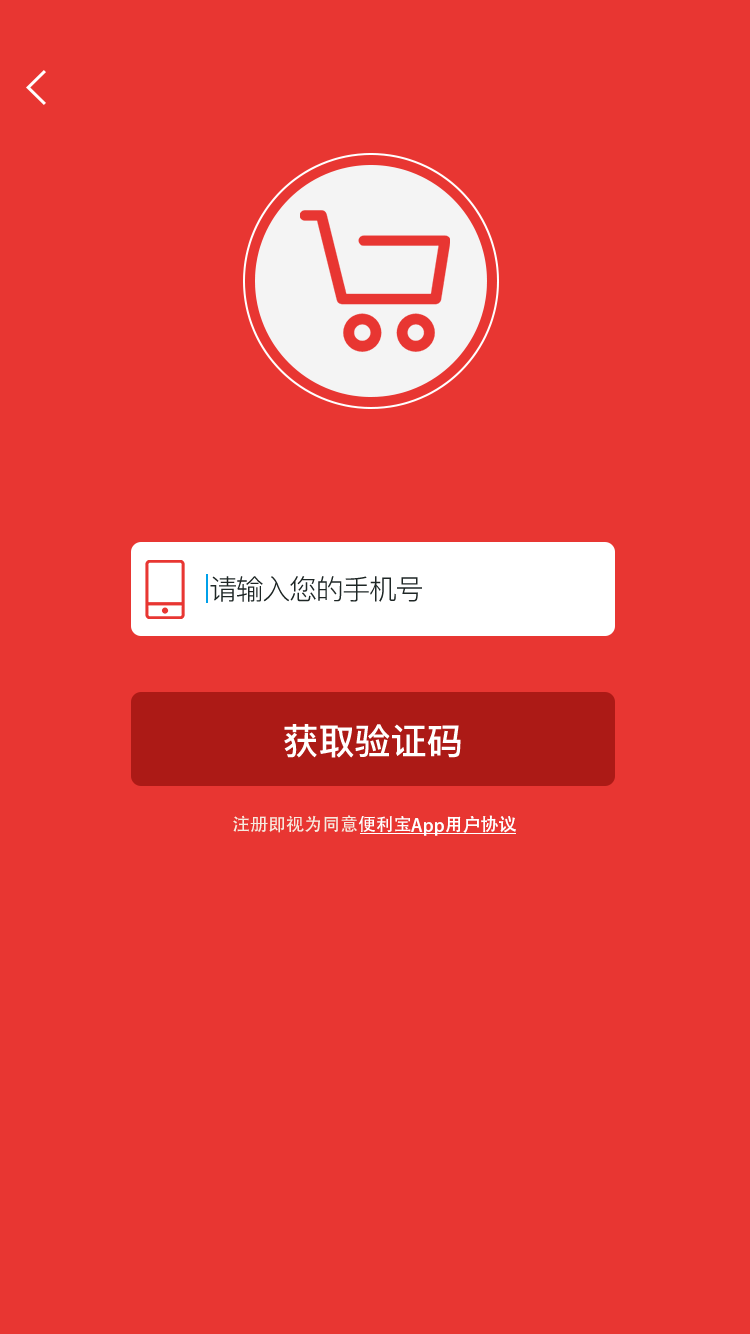
<style>
.page{position:relative;width:750px;height:1334px;background:#e83632}
.page>*{position:absolute;margin:0}
.t1{font:28px "PingFang-SC-Regular";letter-spacing:-0.05em;color:#1e2625}
.t2{font:36px "PingFang-SC-Bold";color:#ffffff}
.t3{font:17.7px "AdobeHeitiStd-Regular";color:#f7eadf}
.t4{font:17.7px "AdobeHeitiStd-Regular";color:#ffffff}
.t5{font:18px "AdobeHeitiStd-Regular";color:#ffffff}
</style>
<div class="page">
<p class="t1" style="left:210px;top:576px;width:212px;height:26px">请输入您的手机号</p>
<p class="t2" style="left:284px;top:724px;width:177px;height:34px">获取验证码</p>
<p class="t3" style="left:233px;top:815px;width:178px;height:18px">注册即视为同意<span class="t4">便利宝</span></p>
<p class="t5" style="left:411px;top:818px;width:33px;height:18px">App</p>
<p class="t4" style="left:446px;top:815px;width:70px;height:18px">用户协议</p>
</div>
